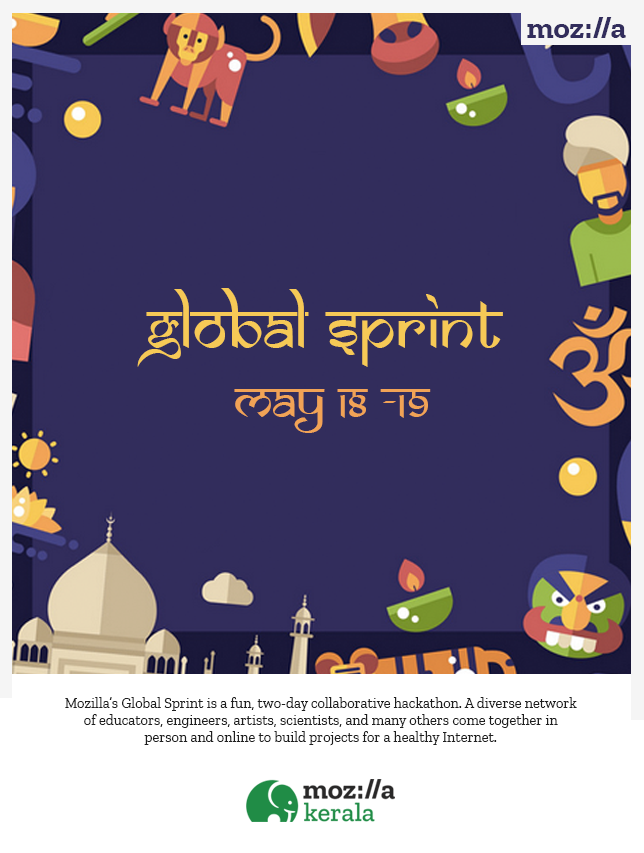
<style>
.page{position:relative;width:644px;height:853px;background:#322d5c}
.page>*{position:absolute;margin:0}
.t1{font:31px "ZillaSlab-Bold";color:#322d5c}
.t2{font:66.8px "SamarkanNormal";color:#f6c956}
.t3{font:50.5px "SamarkanNormal";color:#f1a356}
.t4{font:14.4px "ZillaSlabRegular";color:#1e1e1e}
</style>
<div class="page">
<p class="t1" style="left:527px;top:17px;width:99px;height:21px">moz://a</p>
<p class="t2" style="left:137px;top:288px;width:366px;height:79px">Global sprint</p>
<p class="t3" style="left:234px;top:389px;width:197px;height:44px">may 18 -19</p>
<p class="t4" style="left:65px;top:697px;width:512px;height:49px;text-align:center">Mozilla’s Global Sprint is a fun, two-day collaborative hackathon. A diverse network of educators, engineers, artists, scientists, and many others come together in person and online to build projects for a healthy Internet.</p>
</div>
